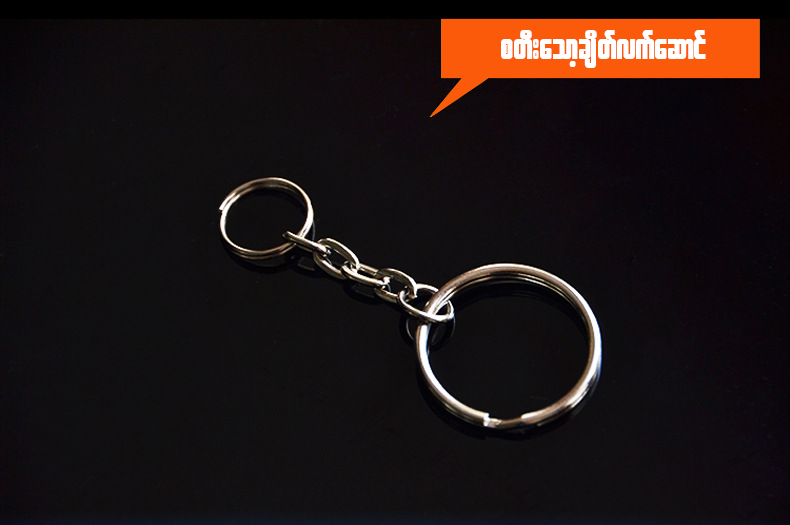
<style>
.page{position:relative;width:790px;height:525px}
.page>*{position:absolute;margin:0}
.t1{font:38.5px "W30ArtHouse";color:#ffffff}
</style>
<div class="page">
<p class="t1" style="left:501px;top:30px;width:205px;height:38px">pwD;aomhcsdwfvufaqmif</p>
</div>
